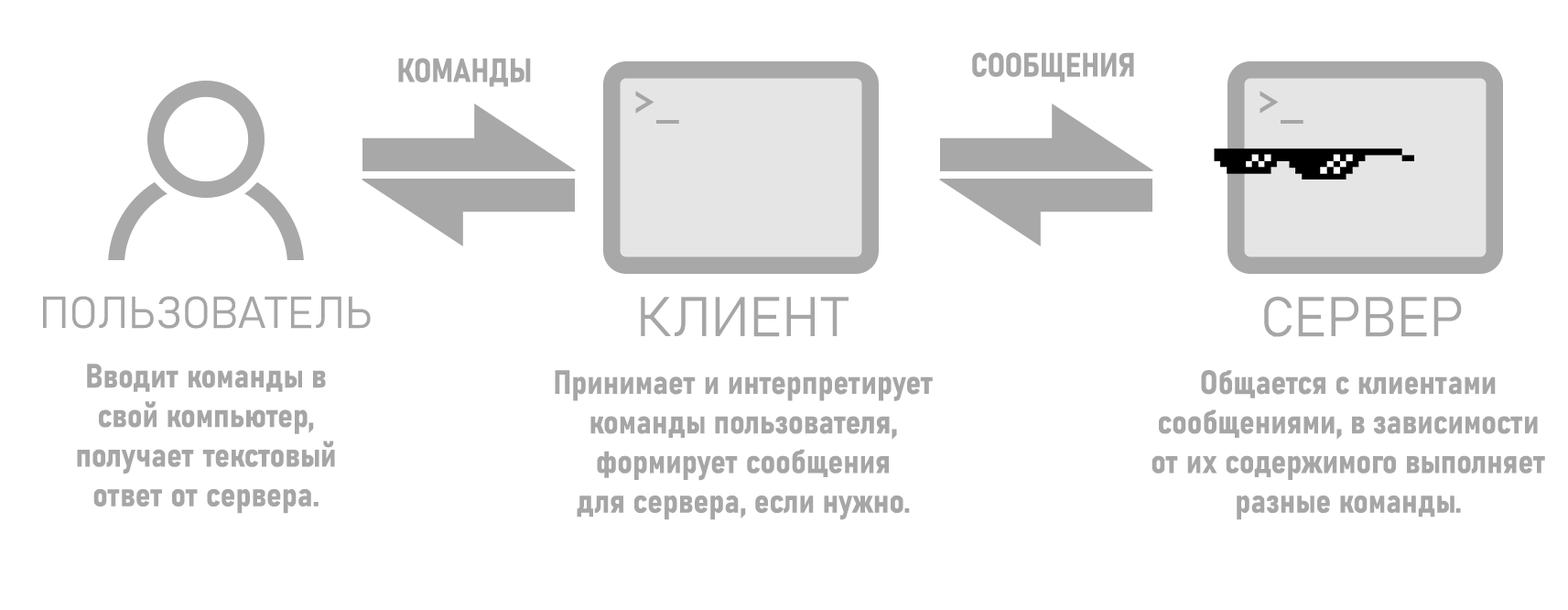
<style>
.page{position:relative;width:1568px;height:610px;background:#ffffff}
.page>*{position:absolute;margin:0}
.t1{font:33px "Bahnschrift-BoldSemiCondensed";color:#a6a6a6}
.t2{font:54.9px "Bahnschrift-Light";color:#a6a6a6}
.t3{font:43.9px "Bahnschrift-Light";color:#a6a6a6}
</style>
<div class="page">
<p class="t1" style="left:972px;top:52px;width:162px;height:30px">СООБЩЕНИЯ</p>
<p class="t1" style="left:398px;top:58px;width:133px;height:29px">КОМАНДЫ</p>
<p class="t2" style="left:635px;top:91px;width:44px;height:33px">&gt;_</p>
<p class="t2" style="left:1260px;top:91px;width:43px;height:33px">&gt;_</p>
<p class="t3" style="left:43px;top:296px;width:328px;height:33px">ПОЛЬЗОВАТЕЛЬ</p>
<p class="t2" style="left:641px;top:297px;width:208px;height:40px">КЛИЕНТ</p>
<p class="t2" style="left:1264px;top:296px;width:198px;height:41px">СЕРВЕР</p>
<p class="t1" style="left:77px;top:363px;width:258px;height:151px;text-align:center">Вводит команды в<br>свой компьютер,<br>получает текстовый<br>ответ от сервера.</p>
<p class="t1" style="left:555px;top:370px;width:378px;height:150px;text-align:center">Принимает и интерпретирует<br>команды пользователя,<br>формирует сообщения<br>для сервера, если нужно.</p>
<p class="t1" style="left:1152px;top:370px;width:393px;height:150px;text-align:center">Общается с клиентами<br>сообщениями, в зависимости<br>от их содержимого выполняет<br>разные команды.</p>
</div>
